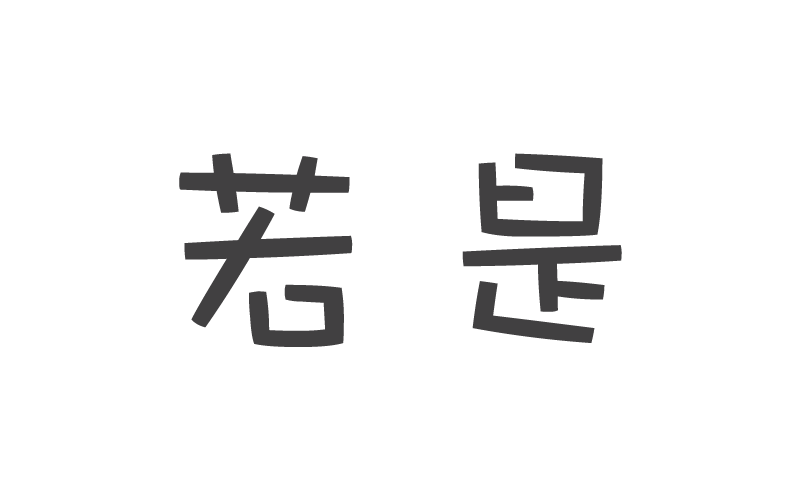
<style>
.page{position:relative;width:800px;height:500px;background:#ffffff}
.page>*{position:absolute;margin:0}
.t1{font:250px "DFWaWaTC-W5";letter-spacing:0.1em;color:#414041}
</style>
<div class="page">
<p class="t1" style="left:179px;top:153px;width:443px;height:194px">若是</p>
</div>
